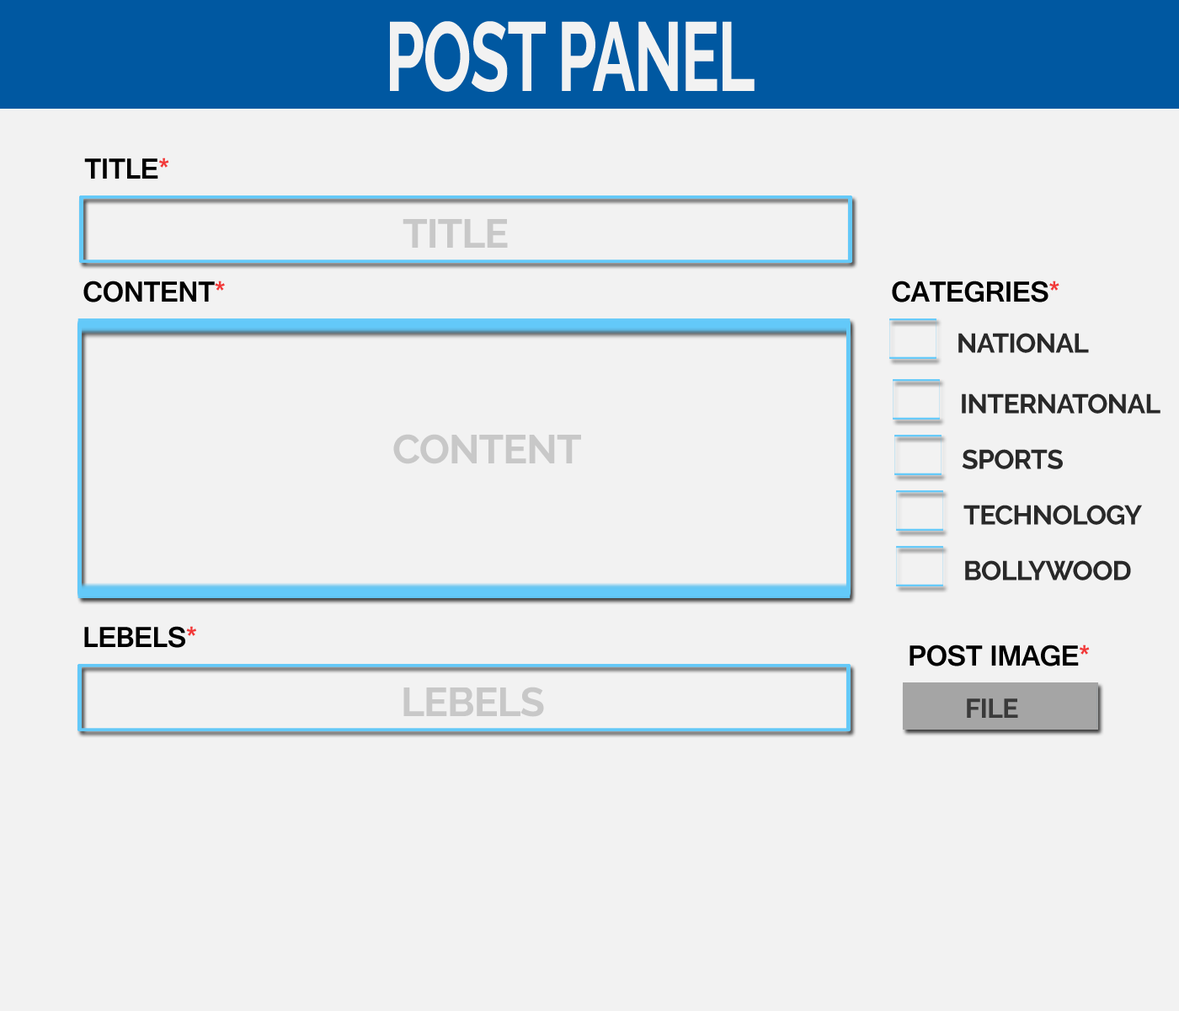
<style>
.page{position:relative;width:1179px;height:1011px;background:#f2f2f2}
.page>*{position:absolute;margin:0}
.t1{font:97.5px "Raleway-Bold";letter-spacing:-0.02em;color:#f2f2f2;scale:0.65 1}
.t2{font:30.3px "Gautami-Bold";letter-spacing:-0.02em;color:#000000}
.t3{font:30.3px "Gautami-Bold";letter-spacing:-0.02em;color:#f23737}
.t4{font:40.4px "Raleway-Bold";letter-spacing:-0.02em;color:#c8c8c8}
.t5{font:27px "Raleway-Bold";letter-spacing:-0.02em;color:#3a3a3a}
</style>
<div class="page">
<p class="t1" style="left:390px;top:21px;width:365px;height:71px">POST PANEL</p>
<p class="t2" style="left:84px;top:158px;width:85px;height:21px">TITLE<span class="t3">*</span></p>
<p class="t4" style="left:403px;top:219px;width:105px;height:29px">TITLE</p>
<p class="t2" style="left:83px;top:281px;width:142px;height:21px">CONTENT<span class="t3">*</span></p>
<p class="t2" style="left:892px;top:281px;width:168px;height:21px">CATEGRIES<span class="t3">*</span></p>
<p class="t4" style="left:393px;top:434px;width:188px;height:30px">CONTENT</p>
<p class="t2" style="left:84px;top:626px;width:112px;height:22px">LEBELS<span class="t3">*</span></p>
<p class="t2" style="left:910px;top:645px;width:180px;height:21px">POST IMAGE<span class="t3">*</span></p>
<p class="t4" style="left:404px;top:687px;width:140px;height:30px">LEBELS</p>
<p class="t5" style="left:967px;top:698px;width:52px;height:20px">FILE</p>
</div>
